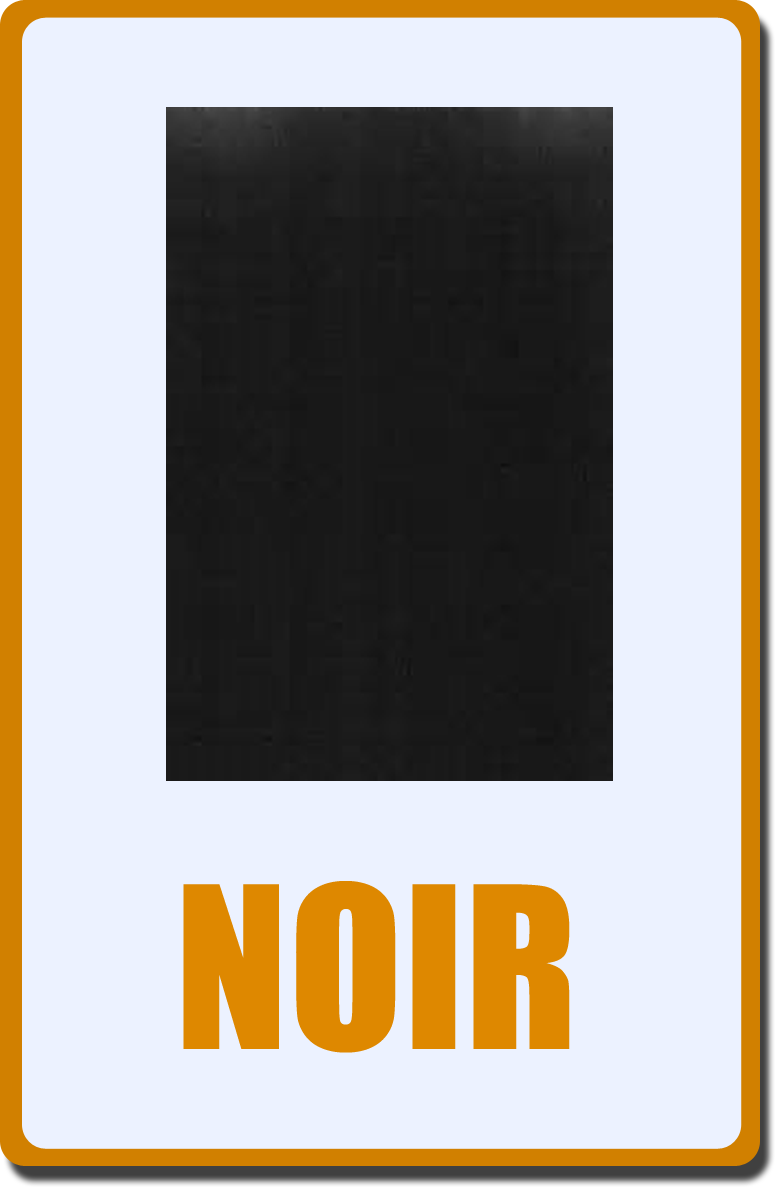
<style>
.page{position:relative;width:775px;height:1187px;background:#ecf2ff}
.page>*{position:absolute;margin:0}
.t1{font:208.3px "Impact";letter-spacing:0.005em;color:#de8800}
</style>
<div class="page">
<p class="t1" style="left:183px;top:881px;width:387px;height:172px">NOIR</p>
</div>
